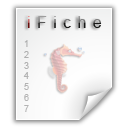
<style>
.page{position:relative;width:128px;height:128px;background:#ffffff}
.page>*{position:absolute;margin:0}
.t1{font:16px "ArialMT";letter-spacing:0.4em}
.t2{font:9px "ArialMT";letter-spacing:0.4em;color:#b2b2b2}
</style>
<div class="page">
<p class="t1" style="left:27px;top:16px;width:75px;height:12px">iFiche</p>
<p class="t2" style="left:23px;top:40px;width:6px;height:72px">1<br>2<br>3<br>4<br>5<br>6<br>7</p>
</div>
